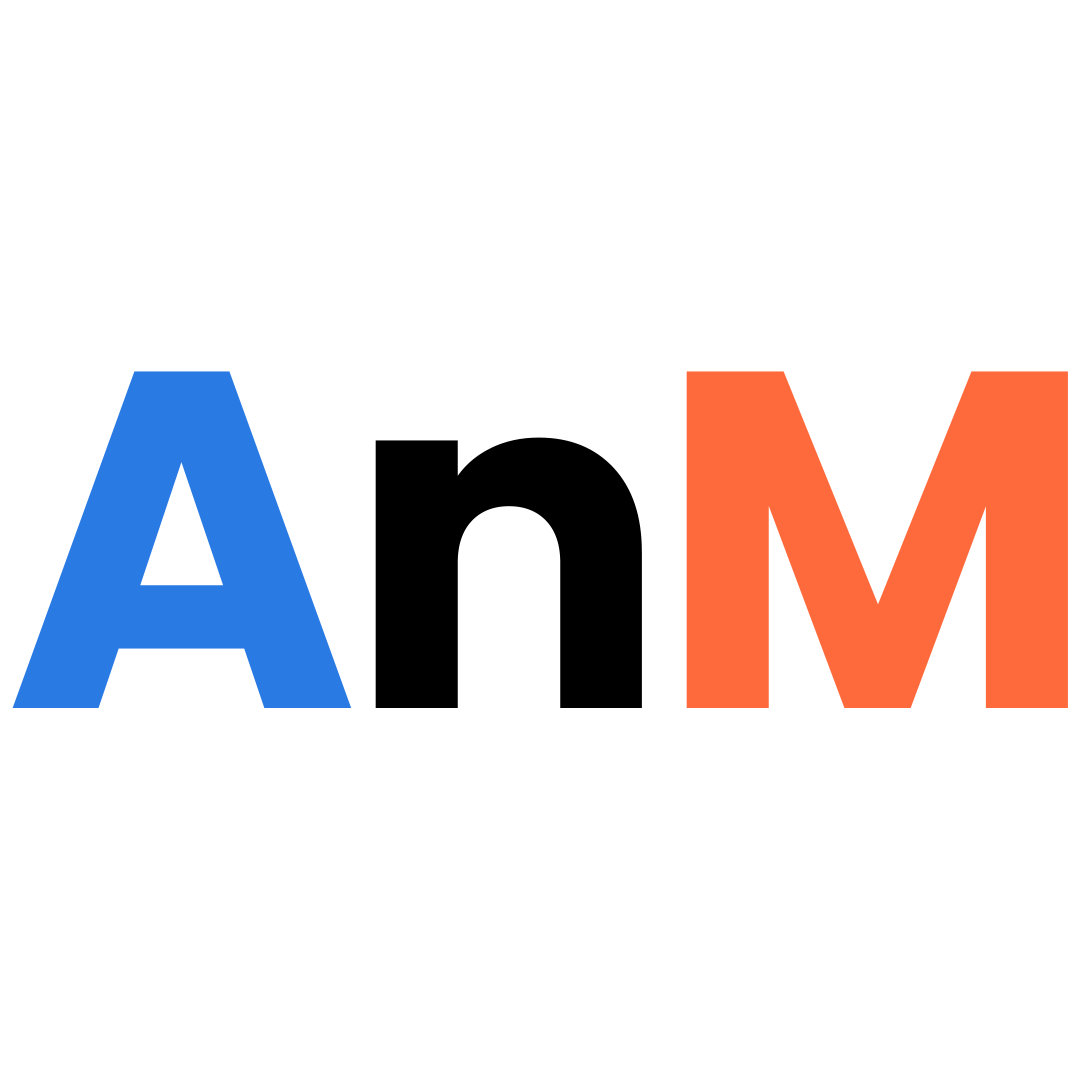
<style>
.page{position:relative;width:1080px;height:1080px;background:#ffffff}
.page>*{position:absolute;margin:0}
.t1{font:479.4px "Poppins-Bold";letter-spacing:-0.025em;color:#2a7ae4}
.t2{font:479.4px "Poppins-Bold";letter-spacing:-0.025em;color:#000000}
.t3{font:479.4px "Poppins-Bold";letter-spacing:-0.025em;color:#ff6a3d}
</style>
<div class="page">
<p class="t1" style="left:12px;top:371px;width:1056px;height:337px">A<span class="t2">n</span><span class="t3">M</span></p>
</div>
